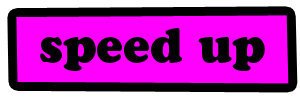
<style>
.page{position:relative;width:300px;height:100px;background:#ff00ff}
.page>*{position:absolute;margin:0}
.t1{font:48px "CooperBlackStd";color:#000000}
</style>
<div class="page">
<p class="t1" style="left:40px;top:28px;width:225px;height:43px">speed up</p>
</div>
